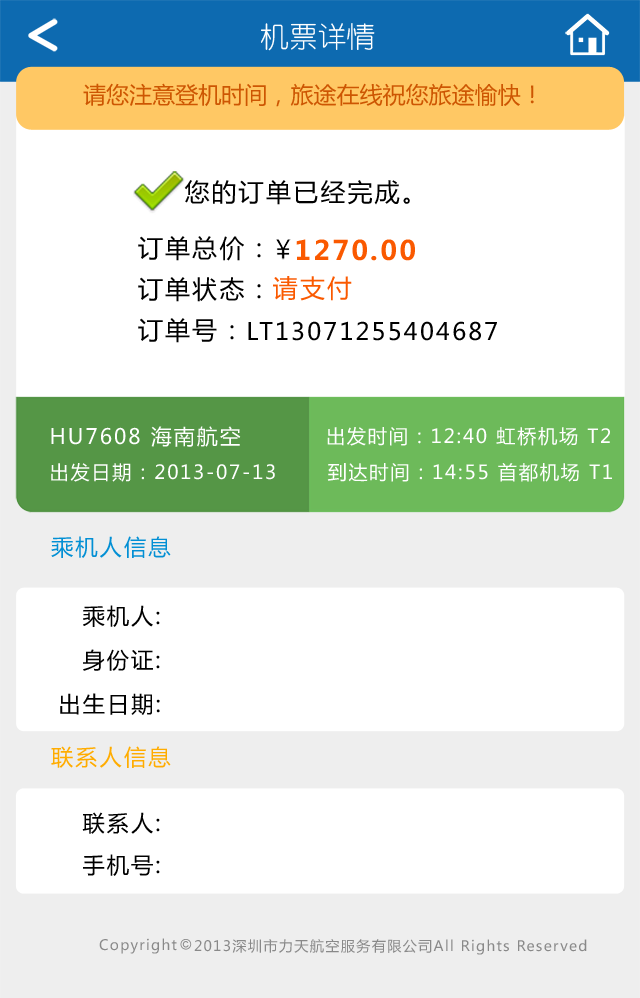
<style>
.page{position:relative;width:640px;height:998px;background:#ffffff}
.page>*{position:absolute;margin:0}
.t1{font:28.8px "YouYuan";color:#ffffff}
.t2{font:23px "MicrosoftYaHei";color:#cd5602}
.t3{font:24.9px "MicrosoftYaHei";letter-spacing:0.09em;color:#000000}
.t4{font:26.9px "MicrosoftYaHei-Bold";letter-spacing:0.09em;color:#fa5900}
.t5{font:24.9px "MicrosoftYaHei";letter-spacing:0.09em;color:#fa5900}
.t6{font:23.8px "MicrosoftYaHei";letter-spacing:0.09em;color:#000000}
.t7{font:21.1px "MicrosoftYaHei";letter-spacing:0.09em;color:#ffffff}
.t8{font:19.2px "MicrosoftYaHei";letter-spacing:0.09em;color:#ffffff}
.t9{font:22.3px "MicrosoftYaHei";letter-spacing:0.09em;color:#028fd4}
.t10{font:22.3px "MicrosoftYaHei";letter-spacing:0.09em;color:#000000}
.t11{font:22.3px "MicrosoftYaHei";letter-spacing:0.09em;color:#ffac00}
.t12{font:14.2px "MicrosoftYaHei";letter-spacing:0.09em;color:#898989}
</style>
<div class="page">
<p class="t1" style="left:261px;top:23px;width:114px;height:28px">机票详情</p>
<p class="t2" style="left:83px;top:83px;width:451px;height:24px">请您注意登机时间，旅途在线祝您旅途愉快！</p>
<p class="t3" style="left:184px;top:180px;width:226px;height:25px">您的订单已经完成。</p>
<p class="t3" style="left:138px;top:236px;width:123px;height:25px">订单总价：</p>
<p class="t4" style="left:296px;top:239px;width:119px;height:22px">1270.00</p>
<p class="t3" style="left:138px;top:277px;width:123px;height:25px">订单状态：</p>
<p class="t5" style="left:273px;top:276px;width:79px;height:25px">请支付</p>
<p class="t3" style="left:138px;top:318px;width:96px;height:25px">订单号：</p>
<p class="t6" style="left:248px;top:321px;width:249px;height:20px">LT13071255404687</p>
<p class="t7" style="left:51px;top:426px;width:190px;height:21px">HU7608 海南航空</p>
<p class="t8" style="left:327px;top:427px;width:283px;height:19px">出发时间：12:40 虹桥机场 T2</p>
<p class="t8" style="left:51px;top:463px;width:224px;height:19px">出发日期：2013-07-13</p>
<p class="t8" style="left:327px;top:463px;width:285px;height:19px">到达时间：14:55 首都机场 T1</p>
<p class="t9" style="left:51px;top:536px;width:120px;height:22px">乘机人信息</p>
<p class="t10" style="left:83px;top:605px;width:77px;height:22px">乘机人:</p>
<p class="t10" style="left:83px;top:649px;width:77px;height:22px">身份证:</p>
<p class="t10" style="left:60px;top:693px;width:100px;height:22px">出生日期:</p>
<p class="t11" style="left:51px;top:746px;width:120px;height:22px">联系人信息</p>
<p class="t10" style="left:82px;top:812px;width:78px;height:22px">联系人:</p>
<p class="t10" style="left:83px;top:854px;width:77px;height:22px">手机号:</p>
<p class="t12" style="left:99px;top:938px;width:78px;height:16px">Copyright</p>
<p class="t12" style="left:194px;top:939px;width:393px;height:16px">2013深圳市力天航空服务有限公司All Rights Reserved</p>
</div>
